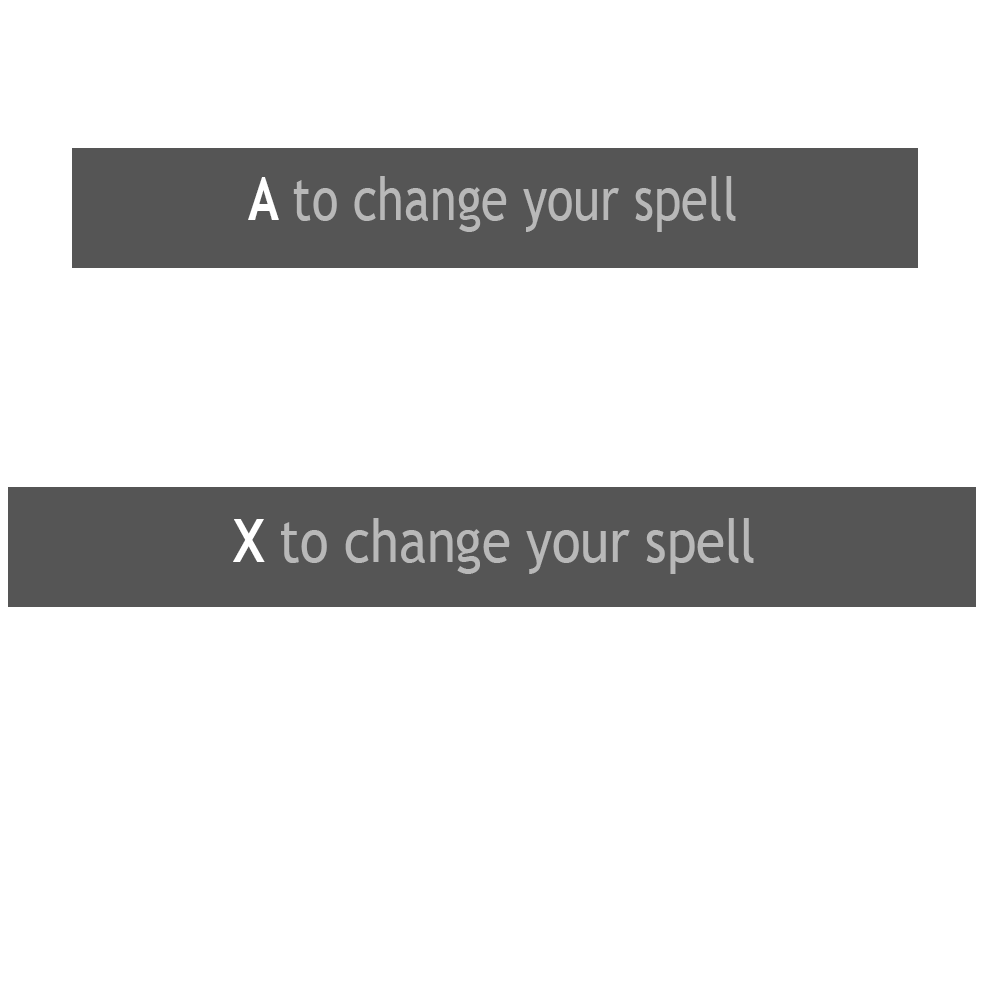
<style>
.page{position:relative;width:1000px;height:1000px;background:#ffffff}
.page>*{position:absolute;margin:0}
.t1{font:60px "TrebuchetMS";color:#b8b8b8;scale:0.82 1}
.t2{font:60px "TrebuchetMS-Bold";color:#ffffff;scale:0.82 1}
.t3{font:60px "TrebuchetMS";color:#b8b8b8;scale:0.88 1}
.t4{font:60px "TrebuchetMS-Bold";color:#ffffff;scale:0.88 1}
</style>
<div class="page">
<p class="t1" style="left:248px;top:176px;width:488px;height:56px"><span class="t2">A </span>to change your spell</p>
<p class="t3" style="left:233px;top:518px;width:521px;height:56px"><span class="t4">X </span>to change your spell</p>
</div>
